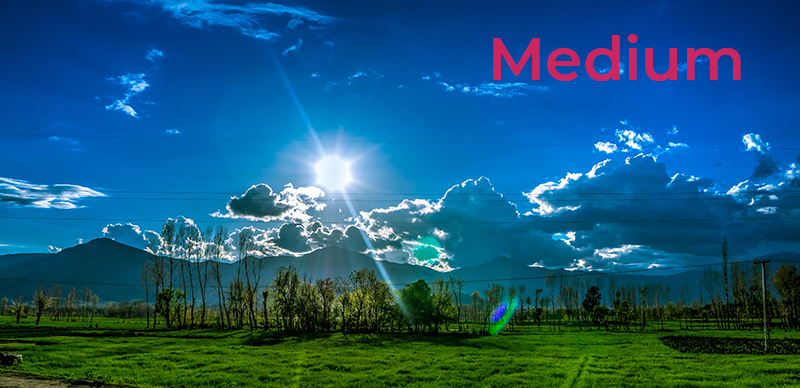
<style>
.page{position:relative;width:800px;height:388px}
.page>*{position:absolute;margin:0}
.t1{font:60px "Montserrat-SemiBold";color:#cc2661}
</style>
<div class="page">
<p class="t1" style="left:493px;top:34px;width:248px;height:47px">Medium</p>
</div>
